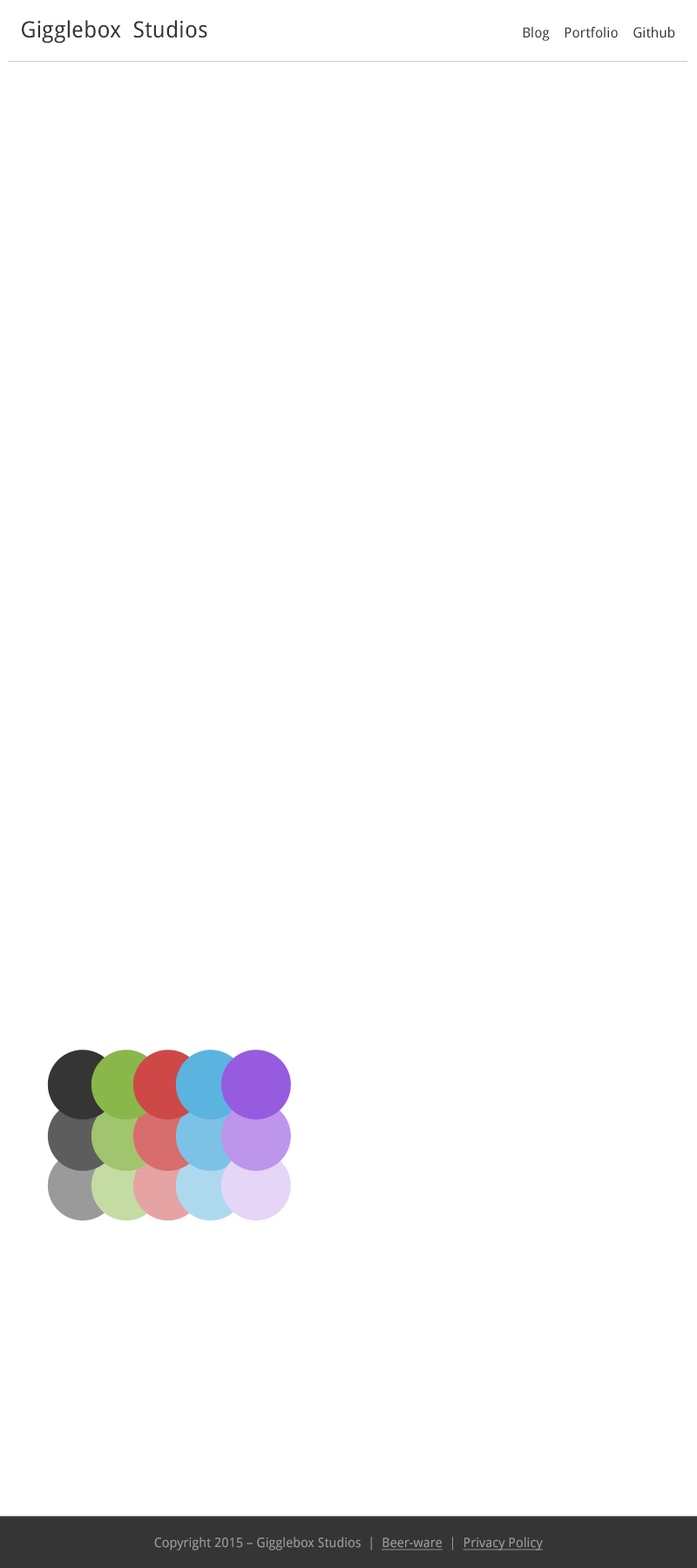
<style>
.page{position:relative;width:697px;height:1568px;background:#ffffff}
.page>*{position:absolute;margin:0}
.t1{font:22.6px "DroidSans";color:#353535}
.t2{font:13.9px "DroidSans";color:#353535}
.t3{font:13.1px "DroidSans";color:#9a9a9a}
.t4{font:13.1px "DroidSans";color:#9a9a9a;text-decoration:underline}
</style>
<div class="page">
<p class="t1" style="left:22px;top:20px;width:185px;height:24px">Gigglebox  Studios</p>
<p class="t2" style="left:523px;top:26px;width:152px;height:15px">Blog    Portfolio    Github</p>
<p class="t3" style="left:154px;top:1537px;width:389px;height:14px">Copyright 2015 – Gigglebox Studios  |  <span class="t4">Beer-ware</span>  |  <span class="t4">Privacy Policy</span></p>
</div>
